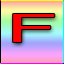
<style>
.page{position:relative;width:64px;height:64px}
.page>*{position:absolute;margin:0}
.t1{font:39px "Helvetica";color:#ff0000;scale:2.12 1}
</style>
<div class="page">
<p class="t1" style="left:13px;top:14px;width:42px;height:28px">F</p>
</div>
